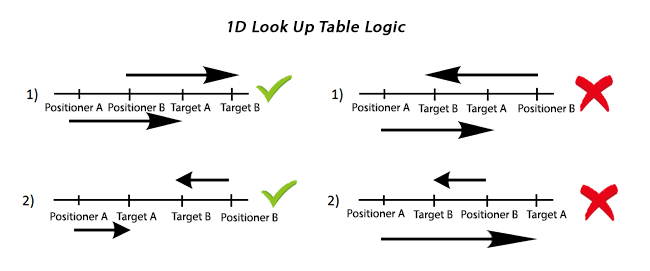
<style>
.page{position:relative;width:650px;height:271px;background:#ffffff}
.page>*{position:absolute;margin:0}
.t1{font:28px "MyriadPro-Regular";color:#000000;font-weight:bold;font-style:italic}
.t2{font:20px "MyriadPro-Regular";color:#000000}
</style>
<div class="page">
<p class="t1" style="left:228px;top:20px;width:178px;height:16px">1D Look Up Table Logic</p>
<p class="t2" style="left:45px;top:103px;width:58px;height:9px">Positioner A</p>
<p class="t2" style="left:108px;top:103px;width:57px;height:9px">Positioner B</p>
<p class="t2" style="left:170px;top:103px;width:41px;height:11px">Target A</p>
<p class="t2" style="left:220px;top:103px;width:40px;height:11px">Target B</p>
<p class="t2" style="left:352px;top:103px;width:58px;height:9px">Positioner A</p>
<p class="t2" style="left:418px;top:104px;width:40px;height:11px">Target B</p>
<p class="t2" style="left:466px;top:104px;width:41px;height:11px">Target A</p>
<p class="t2" style="left:518px;top:104px;width:57px;height:9px">Positioner B</p>
<p class="t2" style="left:347px;top:209px;width:58px;height:9px">Positioner A</p>
<p class="t2" style="left:50px;top:212px;width:58px;height:9px">Positioner A</p>
<p class="t2" style="left:116px;top:212px;width:41px;height:11px">Target A</p>
<p class="t2" style="left:171px;top:212px;width:40px;height:11px">Target B</p>
<p class="t2" style="left:221px;top:213px;width:57px;height:9px">Positioner B</p>
<p class="t2" style="left:413px;top:210px;width:40px;height:11px">Target B</p>
<p class="t2" style="left:461px;top:210px;width:57px;height:9px">Positioner B</p>
<p class="t2" style="left:526px;top:210px;width:41px;height:11px">Target A</p>
</div>
